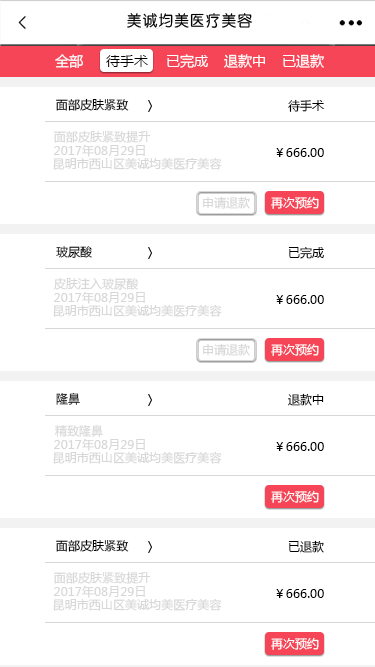
<style>
.page{position:relative;width:375px;height:667px;background:#ffffff}
.page>*{position:absolute;margin:0}
.t1{font:14px "MicrosoftYaHei";letter-spacing:0.005em;color:#ffffff}
.t2{font:14px "MicrosoftYaHei";letter-spacing:0.005em;color:#000000}
.t3{font:12px "MicrosoftYaHei";letter-spacing:0.005em;color:#000000}
.t4{font:12px "MicrosoftYaHei";letter-spacing:0.005em;color:#d7d7d7}
.t5{font:12px "MicrosoftYaHei";letter-spacing:0.005em;color:#ffffff}
.t6{font:12px "MicrosoftYaHei";letter-spacing:0.005em}
</style>
<div class="page">
<p class="t1" style="left:55px;top:54px;width:28px;height:14px">全部</p>
<p class="t1" style="left:167px;top:54px;width:41px;height:14px">已完成</p>
<p class="t1" style="left:224px;top:54px;width:41px;height:14px">退款中</p>
<p class="t1" style="left:283px;top:54px;width:41px;height:14px">已退款</p>
<p class="t2" style="left:106px;top:55px;width:42px;height:12px">待手术</p>
<p class="t3" style="left:56px;top:98px;width:73px;height:13px">面部皮肤紧致</p>
<p class="t3" style="left:288px;top:99px;width:37px;height:13px">待手术</p>
<p class="t4" style="left:54px;top:130px;width:97px;height:13px">面部皮肤紧致提升</p>
<p class="t4" style="left:54px;top:144px;width:91px;height:13px">2017年08月29日</p>
<p class="t3" style="left:276px;top:148px;width:48px;height:9px">￥666.00</p>
<p class="t4" style="left:53px;top:158px;width:169px;height:12px">昆明市西山区美诚均美医疗美容</p>
<p class="t4" style="left:203px;top:196px;width:47px;height:13px">申请退款</p>
<p class="t5" style="left:271px;top:196px;width:48px;height:13px">再次预约</p>
<p class="t3" style="left:56px;top:246px;width:36px;height:12px">玻尿酸</p>
<p class="t3" style="left:288px;top:247px;width:36px;height:12px">已完成</p>
<p class="t4" style="left:54px;top:277px;width:84px;height:13px">皮肤注入玻尿酸</p>
<p class="t4" style="left:54px;top:291px;width:91px;height:13px">2017年08月29日</p>
<p class="t4" style="left:53px;top:305px;width:169px;height:12px">昆明市西山区美诚均美医疗美容</p>
<p class="t3" style="left:276px;top:295px;width:48px;height:9px">￥666.00</p>
<p class="t4" style="left:203px;top:343px;width:47px;height:13px">申请退款</p>
<p class="t5" style="left:271px;top:343px;width:48px;height:13px">再次预约</p>
<p class="t6" style="left:56px;top:392px;width:24px;height:13px">隆鼻</p>
<p class="t3" style="left:288px;top:393px;width:36px;height:13px">退款中</p>
<p class="t4" style="left:55px;top:424px;width:48px;height:13px">精致隆鼻</p>
<p class="t4" style="left:54px;top:438px;width:91px;height:13px">2017年08月29日</p>
<p class="t3" style="left:276px;top:442px;width:48px;height:9px">￥666.00</p>
<p class="t4" style="left:53px;top:452px;width:169px;height:12px">昆明市西山区美诚均美医疗美容</p>
<p class="t5" style="left:271px;top:490px;width:48px;height:13px">再次预约</p>
<p class="t3" style="left:56px;top:539px;width:73px;height:13px">面部皮肤紧致</p>
<p class="t3" style="left:288px;top:540px;width:36px;height:13px">已退款</p>
<p class="t4" style="left:54px;top:571px;width:97px;height:13px">面部皮肤紧致提升</p>
<p class="t4" style="left:54px;top:585px;width:91px;height:13px">2017年08月29日</p>
<p class="t3" style="left:276px;top:589px;width:48px;height:9px">￥666.00</p>
<p class="t4" style="left:53px;top:599px;width:169px;height:12px">昆明市西山区美诚均美医疗美容</p>
<p class="t5" style="left:271px;top:637px;width:48px;height:13px">再次预约</p>
</div>
